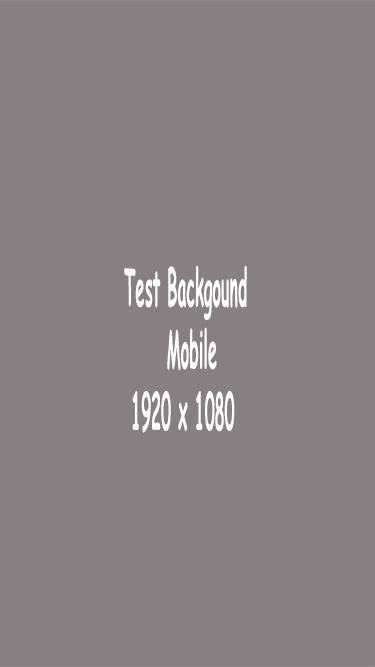
<style>
.page{position:relative;width:375px;height:667px;background:#887f82}
.page>*{position:absolute;margin:0}
.t1{font:51.5px "ComicSansMS-Bold";color:#ffffff;scale:0.32 1}
</style>
<div class="page">
<p class="t1" style="left:124px;top:265px;width:123px;height:168px">Test Backgound<br>      Mobile<br> 1920 x 1080</p>
</div>
